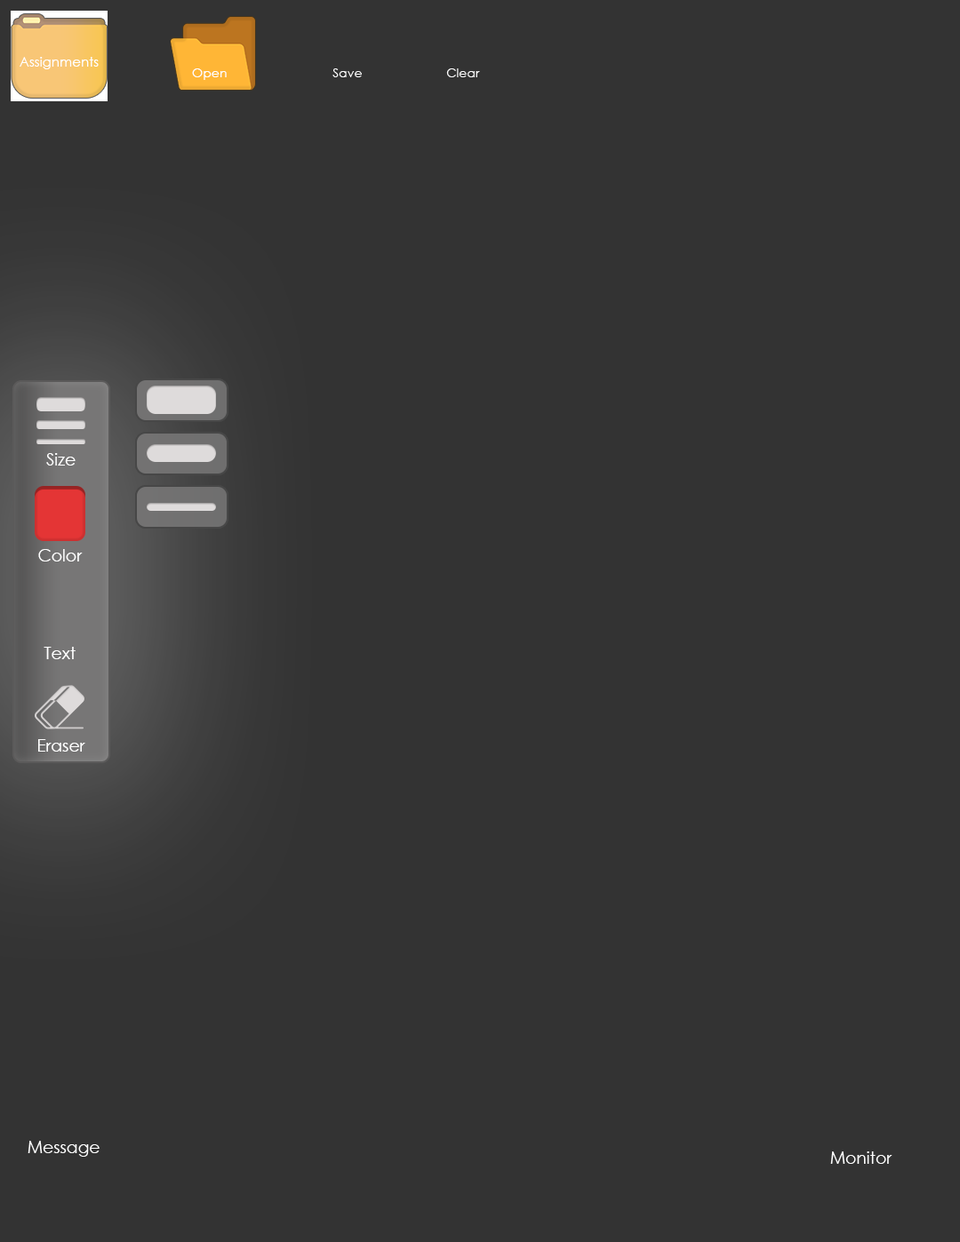
<style>
.page{position:relative;width:960px;height:1242px;background:#333333}
.page>*{position:absolute;margin:0}
.t1{font:13.4px "CenturyGothic";color:#ffffff}
.t2{font:12.5px "CenturyGothic";color:#ffffff}
.t3{font:16.7px "CenturyGothic";color:#ffffff}
</style>
<div class="page">
<p class="t1" style="left:20px;top:57px;width:79px;height:12px">Assignments</p>
<p class="t2" style="left:192px;top:68px;width:35px;height:12px">Open</p>
<p class="t2" style="left:332px;top:68px;width:30px;height:9px">Save</p>
<p class="t2" style="left:446px;top:68px;width:34px;height:9px">Clear</p>
<p class="t3" style="left:46px;top:453px;width:30px;height:13px">Size</p>
<p class="t3" style="left:38px;top:549px;width:45px;height:13px">Color</p>
<p class="t3" style="left:44px;top:647px;width:32px;height:12px">Text</p>
<p class="t3" style="left:38px;top:739px;width:47px;height:13px">Eraser</p>
<p class="t3" style="left:28px;top:1141px;width:72px;height:16px">Message</p>
<p class="t3" style="left:830px;top:1152px;width:62px;height:12px">Monitor</p>
</div>
